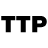
<style>
.page{position:relative;width:48px;height:48px;background:#ffffff}
.page>*{position:absolute;margin:0}
.t1{font:22.8px "HelveticaNeueLTStd-Blk";color:#000000}
</style>
<div class="page">
<p class="t1" style="left:1px;top:16px;width:46px;height:17px">TTP</p>
</div>
